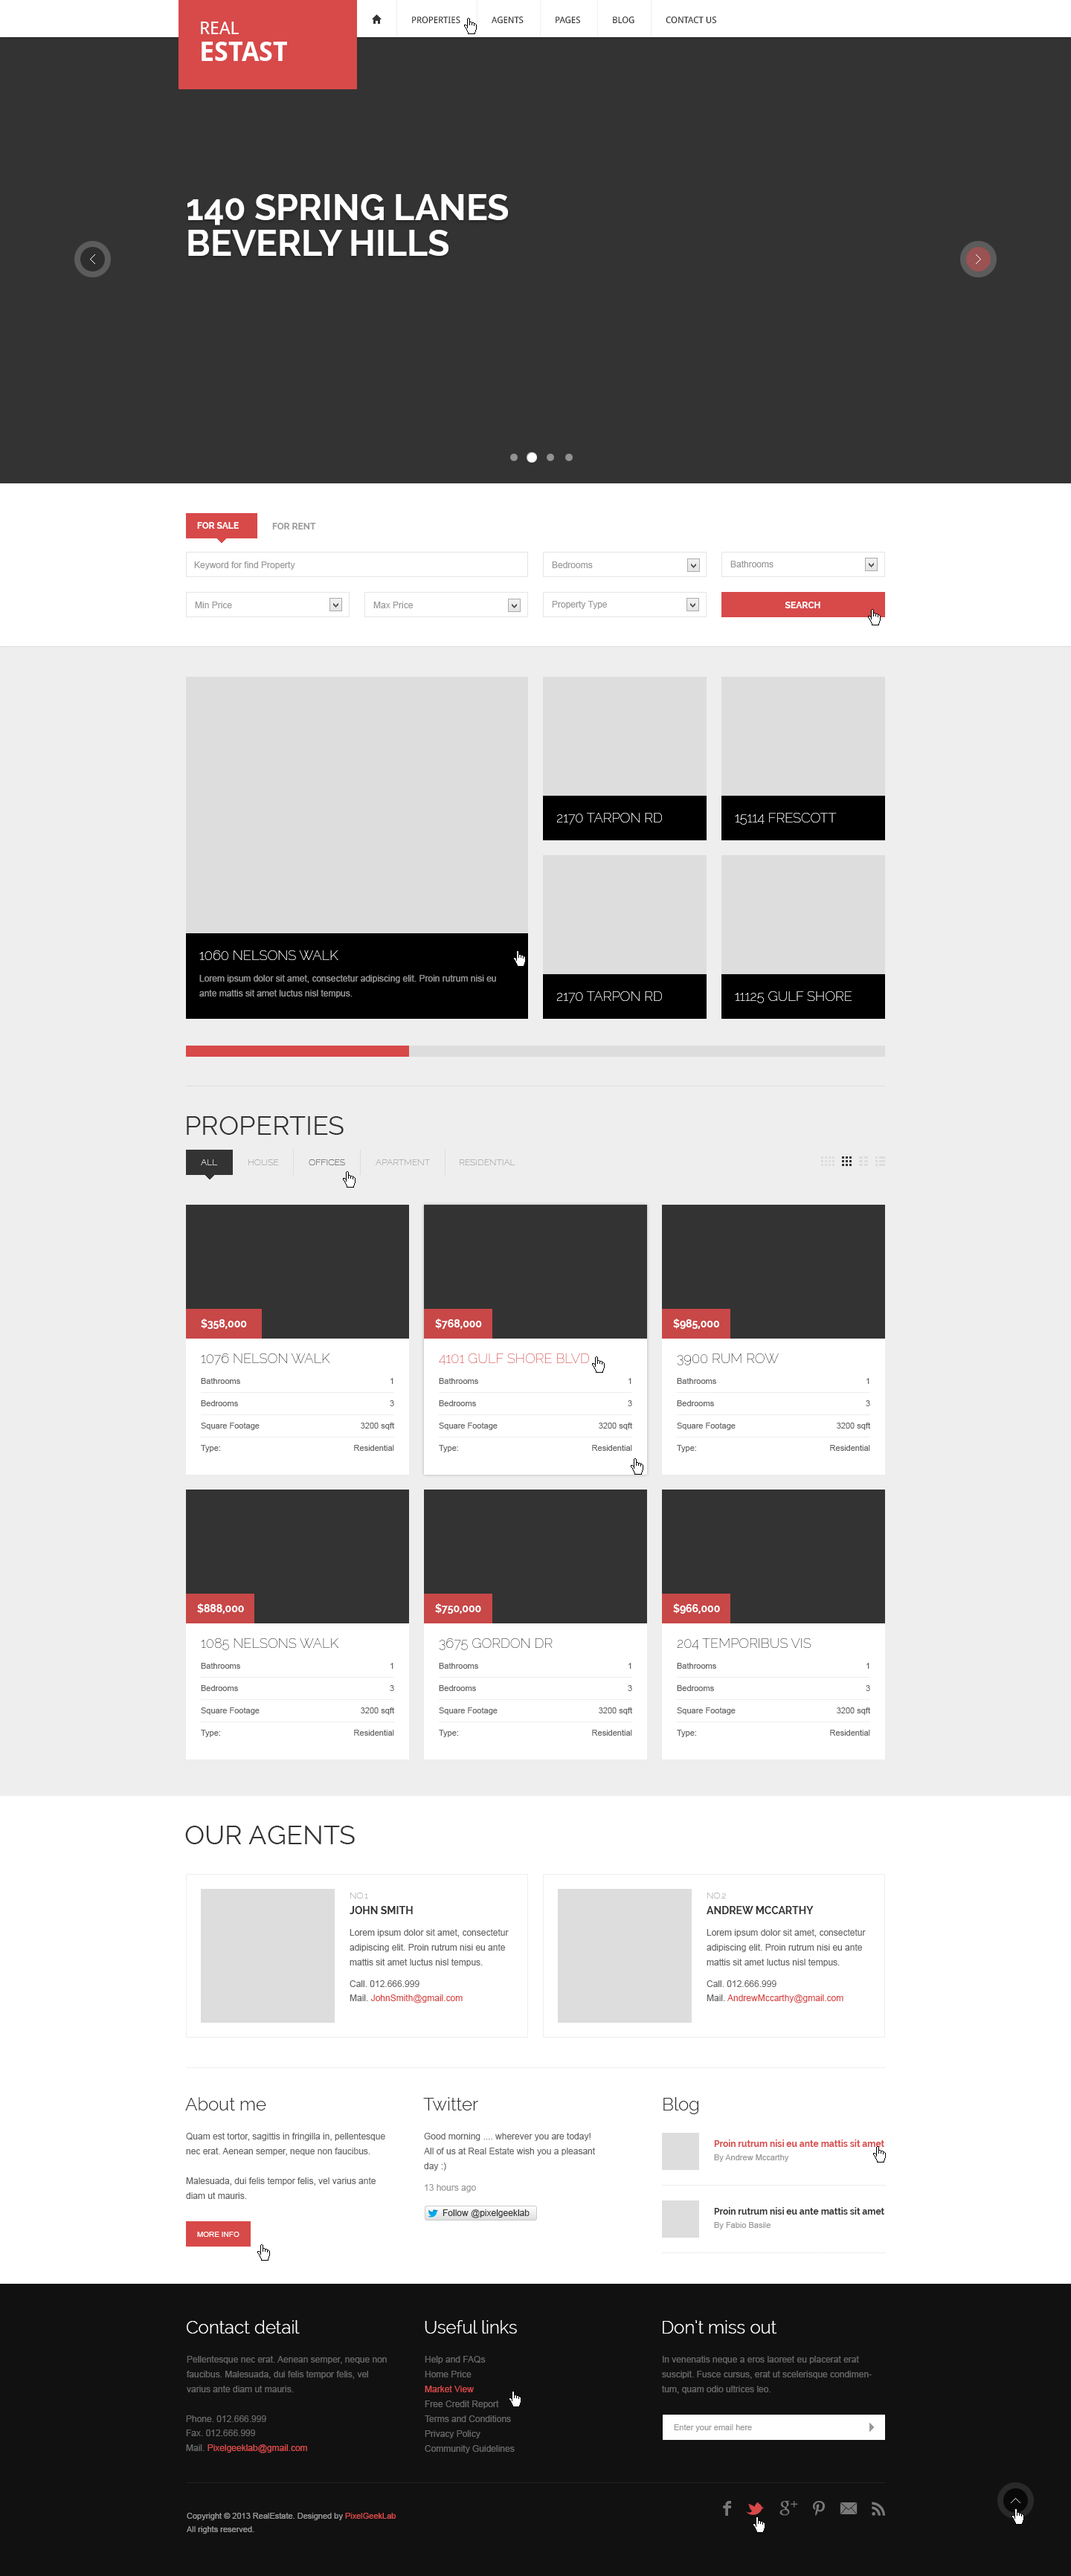
<style>
.page{position:relative;width:1071px;height:2576px;background:#ffffff}
.page>*{position:absolute;margin:0}
.t1{font:8.9px "DroidSans";color:#333333;text-transform:uppercase}
.t2{font:26.8px/26.8px "DroidSans-Bold";color:#ffffff;text-transform:uppercase}
.t3{font:17.8px/26.8px "DroidSans";color:#ffffff;text-transform:uppercase}
.t4{font:35.7px/35.7px "Raleway-Bold";color:#ffffff}
.t5{font:8.9px "Raleway-Bold";color:#ffffff;text-transform:uppercase}
.t6{font:8.9px "Raleway-Bold";color:#999999;text-transform:uppercase}
.t7{font:8.9px "ArialMT";color:#999999}
.t8{font:13.4px "Raleway-Thin";color:#ffffff}
.t9{font:13.4px "Raleway-Thin";color:#ffffff;text-transform:uppercase}
.t10{font:8.9px/14.9px "ArialMT";color:#999999}
.t11{font:26.8px "Raleway";color:#333333;text-transform:uppercase}
.t12{font:8.9px "Raleway-Thin";text-transform:uppercase}
.t13{font:10.4px "Raleway-Bold";color:#ffffff;text-transform:uppercase}
.t14{font:13.4px "Raleway-Thin";color:#333333;text-transform:uppercase}
.t15{font:13.4px "Raleway-Thin";color:#d84949;text-transform:uppercase}
.t16{font:8.2px "ArialMT";color:#666666}
.t17{font:10.4px "Raleway-Bold";color:#333333;text-transform:uppercase}
.t18{font:8.9px/14.9px "ArialMT";color:#666666}
.t19{font:8.9px "ArialMT";color:#666666}
.t20{font:8.9px "ArialMT";color:#333333}
.t21{font:8.9px "ArialMT";color:#d84949}
.t22{font:17.8px "Raleway-Light";color:#333333}
.t23{font:8.9px "Raleway-Bold";color:#d84949}
.t24{font:8.2px "ArialMT";color:#999999}
.t25{font:8.9px "Raleway-Bold";color:#333333}
.t26{font:7.4px "ArialMT";color:#ffffff;text-transform:uppercase}
.t27{font:17.8px "Raleway-Light";color:#ffffff}
.t28{font:8.2px/13.4px "ArialMT";color:#999999}
.t29{font:8.2px/13.4px "ArialMT";color:#d84949}
</style>
<div class="page">
<p class="t1" style="left:412px;top:16px;width:48px;height:8px">Properties</p>
<p class="t1" style="left:492px;top:16px;width:32px;height:8px">agents</p>
<p class="t1" style="left:556px;top:16px;width:25px;height:8px">pages</p>
<p class="t1" style="left:613px;top:16px;width:21px;height:8px">blog</p>
<p class="t1" style="left:666px;top:16px;width:51px;height:8px">contact us</p>
<p class="t2" style="left:201px;top:22px;width:86px;height:39px"><span class="t3">Real <br></span>Estast</p>
<p class="t4" style="left:187px;top:194px;width:321px;height:62px">140 SPRING LANES <br>BEVERLY HILLS</p>
<p class="t5" style="left:197px;top:522px;width:42px;height:7px">for sale</p>
<p class="t6" style="left:272px;top:523px;width:44px;height:6px">for rent</p>
<p class="t7" style="left:194px;top:561px;width:101px;height:9px">Keyword for find Property</p>
<p class="t7" style="left:552px;top:561px;width:41px;height:7px">Bedrooms</p>
<p class="t7" style="left:730px;top:561px;width:43px;height:6px">Bathrooms</p>
<p class="t7" style="left:195px;top:602px;width:37px;height:6px">Min Price</p>
<p class="t7" style="left:373px;top:602px;width:40px;height:6px">Max Price</p>
<p class="t7" style="left:552px;top:601px;width:55px;height:8px">Property Type</p>
<p class="t5" style="left:785px;top:602px;width:35px;height:6px">search</p>
<p class="t8" style="left:556px;top:813px;width:106px;height:12px">2170 TARPON RD</p>
<p class="t8" style="left:735px;top:813px;width:102px;height:12px">15114 FRESCOTT</p>
<p class="t9" style="left:199px;top:950px;width:139px;height:10px">1060 Nelsons Walk</p>
<p class="t10" style="left:199px;top:975px;width:297px;height:23px">Lorem ipsum dolor sit amet, consectetur adipiscing elit. Proin rutrum nisi eu ante mattis sit amet luctus nisl tempus.</p>
<p class="t8" style="left:556px;top:991px;width:106px;height:12px">2170 TARPON RD</p>
<p class="t8" style="left:735px;top:991px;width:117px;height:12px">11125 GULF SHORE</p>
<p class="t11" style="left:187px;top:1116px;width:157px;height:19px">Properties</p>
<p class="t12" style="left:201px;top:1159px;width:17px;height:6px">all</p>
<p class="t12" style="left:248px;top:1159px;width:31px;height:6px">house</p>
<p class="t12" style="left:309px;top:1159px;width:36px;height:6px">offices</p>
<p class="t12" style="left:376px;top:1159px;width:54px;height:6px">apartment</p>
<p class="t12" style="left:460px;top:1159px;width:55px;height:6px">Residential</p>
<p class="t13" style="left:201px;top:1318px;width:46px;height:11px">$358,000</p>
<p class="t13" style="left:435px;top:1318px;width:47px;height:11px">$768,000</p>
<p class="t13" style="left:673px;top:1318px;width:46px;height:11px">$985,000</p>
<p class="t14" style="left:201px;top:1353px;width:129px;height:12px">1076 Nelson Walk</p>
<p class="t15" style="left:439px;top:1353px;width:150px;height:12px">4101 Gulf Shore Blvd</p>
<p class="t14" style="left:677px;top:1353px;width:102px;height:12px">3900 Rum Row</p>
<p class="t16" style="left:201px;top:1378px;width:39px;height:6px">Bathrooms</p>
<p class="t16" style="left:390px;top:1378px;width:3px;height:6px">1</p>
<p class="t16" style="left:439px;top:1378px;width:39px;height:6px">Bathrooms</p>
<p class="t16" style="left:628px;top:1378px;width:3px;height:6px">1</p>
<p class="t16" style="left:677px;top:1378px;width:39px;height:6px">Bathrooms</p>
<p class="t16" style="left:866px;top:1378px;width:3px;height:6px">1</p>
<p class="t16" style="left:201px;top:1400px;width:37px;height:6px">Bedrooms</p>
<p class="t16" style="left:390px;top:1400px;width:4px;height:6px">3</p>
<p class="t16" style="left:439px;top:1400px;width:37px;height:6px">Bedrooms</p>
<p class="t16" style="left:628px;top:1400px;width:4px;height:6px">3</p>
<p class="t16" style="left:677px;top:1400px;width:37px;height:6px">Bedrooms</p>
<p class="t16" style="left:866px;top:1400px;width:4px;height:6px">3</p>
<p class="t16" style="left:201px;top:1423px;width:59px;height:7px">Square Footage</p>
<p class="t16" style="left:361px;top:1423px;width:33px;height:7px">3200 sqft</p>
<p class="t16" style="left:439px;top:1423px;width:59px;height:7px">Square Footage</p>
<p class="t16" style="left:599px;top:1423px;width:33px;height:7px">3200 sqft</p>
<p class="t16" style="left:677px;top:1423px;width:58px;height:7px">Square Footage</p>
<p class="t16" style="left:837px;top:1423px;width:33px;height:7px">3200 sqft</p>
<p class="t16" style="left:201px;top:1445px;width:19px;height:7px">Type:</p>
<p class="t16" style="left:354px;top:1445px;width:40px;height:6px">Residential</p>
<p class="t16" style="left:439px;top:1445px;width:19px;height:7px">Type:</p>
<p class="t16" style="left:592px;top:1445px;width:40px;height:6px">Residential</p>
<p class="t16" style="left:677px;top:1445px;width:19px;height:7px">Type:</p>
<p class="t16" style="left:830px;top:1445px;width:40px;height:6px">Residential</p>
<p class="t13" style="left:197px;top:1603px;width:47px;height:11px">$888,000</p>
<p class="t13" style="left:435px;top:1603px;width:46px;height:11px">$750,000</p>
<p class="t13" style="left:673px;top:1603px;width:47px;height:11px">$966,000</p>
<p class="t14" style="left:201px;top:1638px;width:137px;height:12px">1085 Nelsons Walk</p>
<p class="t14" style="left:439px;top:1638px;width:114px;height:12px">3675 Gordon Dr</p>
<p class="t14" style="left:677px;top:1638px;width:134px;height:11px">204 temporibus vis</p>
<p class="t16" style="left:201px;top:1663px;width:39px;height:6px">Bathrooms</p>
<p class="t16" style="left:390px;top:1663px;width:3px;height:6px">1</p>
<p class="t16" style="left:439px;top:1663px;width:39px;height:6px">Bathrooms</p>
<p class="t16" style="left:628px;top:1663px;width:3px;height:6px">1</p>
<p class="t16" style="left:677px;top:1663px;width:39px;height:6px">Bathrooms</p>
<p class="t16" style="left:866px;top:1663px;width:3px;height:6px">1</p>
<p class="t16" style="left:201px;top:1685px;width:37px;height:6px">Bedrooms</p>
<p class="t16" style="left:390px;top:1685px;width:4px;height:6px">3</p>
<p class="t16" style="left:439px;top:1685px;width:37px;height:6px">Bedrooms</p>
<p class="t16" style="left:628px;top:1685px;width:4px;height:6px">3</p>
<p class="t16" style="left:677px;top:1685px;width:37px;height:6px">Bedrooms</p>
<p class="t16" style="left:866px;top:1685px;width:4px;height:6px">3</p>
<p class="t16" style="left:201px;top:1707px;width:59px;height:8px">Square Footage</p>
<p class="t16" style="left:361px;top:1707px;width:33px;height:8px">3200 sqft</p>
<p class="t16" style="left:439px;top:1707px;width:59px;height:8px">Square Footage</p>
<p class="t16" style="left:599px;top:1707px;width:33px;height:8px">3200 sqft</p>
<p class="t16" style="left:677px;top:1707px;width:58px;height:8px">Square Footage</p>
<p class="t16" style="left:837px;top:1707px;width:33px;height:8px">3200 sqft</p>
<p class="t16" style="left:201px;top:1730px;width:19px;height:7px">Type:</p>
<p class="t16" style="left:354px;top:1730px;width:40px;height:6px">Residential</p>
<p class="t16" style="left:439px;top:1730px;width:19px;height:7px">Type:</p>
<p class="t16" style="left:592px;top:1730px;width:40px;height:6px">Residential</p>
<p class="t16" style="left:677px;top:1730px;width:19px;height:7px">Type:</p>
<p class="t16" style="left:830px;top:1730px;width:40px;height:6px">Residential</p>
<p class="t11" style="left:185px;top:1826px;width:170px;height:18px">our Agents</p>
<p class="t12" style="left:350px;top:1893px;width:18px;height:6px">No.1</p>
<p class="t12" style="left:707px;top:1893px;width:19px;height:6px">No.2</p>
<p class="t17" style="left:350px;top:1906px;width:63px;height:8px">John Smith</p>
<p class="t17" style="left:706px;top:1906px;width:108px;height:8px">Andrew McCarthy</p>
<p class="t18" style="left:350px;top:1929px;width:159px;height:38px">Lorem ipsum dolor sit amet, consectetur adipiscing elit. Proin rutrum nisi eu ante mattis sit amet luctus nisl tempus.</p>
<p class="t18" style="left:706px;top:1929px;width:160px;height:38px">Lorem ipsum dolor sit amet, consectetur adipiscing elit. Proin rutrum nisi eu ante mattis sit amet luctus nisl tempus.</p>
<p class="t19" style="left:350px;top:1980px;width:69px;height:7px"><span class="t20">Call. </span>012.666.999</p>
<p class="t19" style="left:706px;top:1980px;width:70px;height:7px"><span class="t20">Call. </span>012.666.999</p>
<p class="t21" style="left:350px;top:1994px;width:113px;height:9px"><span class="t19">Mail. </span>JohnSmith@gmail.com</p>
<p class="t21" style="left:706px;top:1994px;width:137px;height:9px"><span class="t19">Mail. </span>AndrewMccarthy@gmail.com</p>
<p class="t22" style="left:185px;top:2097px;width:81px;height:13px">About me</p>
<p class="t22" style="left:423px;top:2097px;width:55px;height:13px">Twitter</p>
<p class="t22" style="left:663px;top:2097px;width:35px;height:17px">Blog</p>
<p class="t18" style="left:186px;top:2133px;width:199px;height:66px">Quam est tortor, sagittis in fringilla in, pellentesque nec erat. Aenean semper, neque non faucibus. <br><br>Malesuada, dui felis tempor felis, vel varius ante diam ut mauris.</p>
<p class="t18" style="left:424px;top:2133px;width:171px;height:38px">Good morning .... wherever you are today! <br>All of us at Real Estate wish you a pleasant <br>day :)</p>
<p class="t23" style="left:714px;top:2139px;width:170px;height:8px">Proin rutrum nisi eu ante mattis sit amet</p>
<p class="t24" style="left:714px;top:2154px;width:75px;height:8px">By Andrew Mccarthy</p>
<p class="t7" style="left:425px;top:2184px;width:51px;height:8px">13 hours ago</p>
<p class="t20" style="left:442px;top:2209px;width:87px;height:9px">Follow @pixelgeeklab</p>
<p class="t25" style="left:714px;top:2207px;width:170px;height:8px">Proin rutrum nisi eu ante mattis sit amet</p>
<p class="t24" style="left:714px;top:2222px;width:56px;height:7px">By Fabio Basile</p>
<p class="t26" style="left:197px;top:2232px;width:42px;height:5px">More info</p>
<p class="t27" style="left:187px;top:2320px;width:113px;height:14px">Contact detail</p>
<p class="t27" style="left:425px;top:2320px;width:92px;height:14px">Useful links</p>
<p class="t27" style="left:663px;top:2320px;width:114px;height:14px">Don’t miss out</p>
<p class="t18" style="left:187px;top:2356px;width:200px;height:36px">Pellentesque nec erat. Aenean semper, neque non faucibus. Malesuada, dui felis tempor felis, vel varius ante diam ut mauris.</p>
<p class="t19" style="left:425px;top:2356px;width:61px;height:8px">Help and FAQs</p>
<p class="t18" style="left:662px;top:2356px;width:210px;height:38px">In venenatis neque a eros laoreet eu placerat erat suscipit. Fusce cursus, erat ut scelerisque condimentum, quam odio ultrices leo.</p>
<p class="t19" style="left:425px;top:2371px;width:46px;height:6px">Home Price</p>
<p class="t21" style="left:425px;top:2386px;width:49px;height:6px">Market View</p>
<p class="t19" style="left:425px;top:2400px;width:74px;height:9px">Free Credit Report</p>
<p class="t19" style="left:186px;top:2415px;width:80px;height:7px">Phone. 012.666.999</p>
<p class="t19" style="left:425px;top:2415px;width:86px;height:7px">Terms and Conditions</p>
<p class="t19" style="left:186px;top:2430px;width:69px;height:6px">Fax. 012.666.999</p>
<p class="t24" style="left:674px;top:2424px;width:78px;height:8px">Enter your email here</p>
<p class="t19" style="left:425px;top:2430px;width:55px;height:8px">Privacy Policy</p>
<p class="t21" style="left:186px;top:2444px;width:121px;height:9px"><span class="t19">Mail. </span>Pixelgeeklab@gmail.com</p>
<p class="t19" style="left:425px;top:2445px;width:90px;height:8px">Community Guidelines</p>
<p class="t28" style="left:187px;top:2513px;width:209px;height:21px">Copyright © 2013 RealEstate. Designed by <span class="t29">PixelGeekLab<br></span>All rights reserved.</p>
</div>
